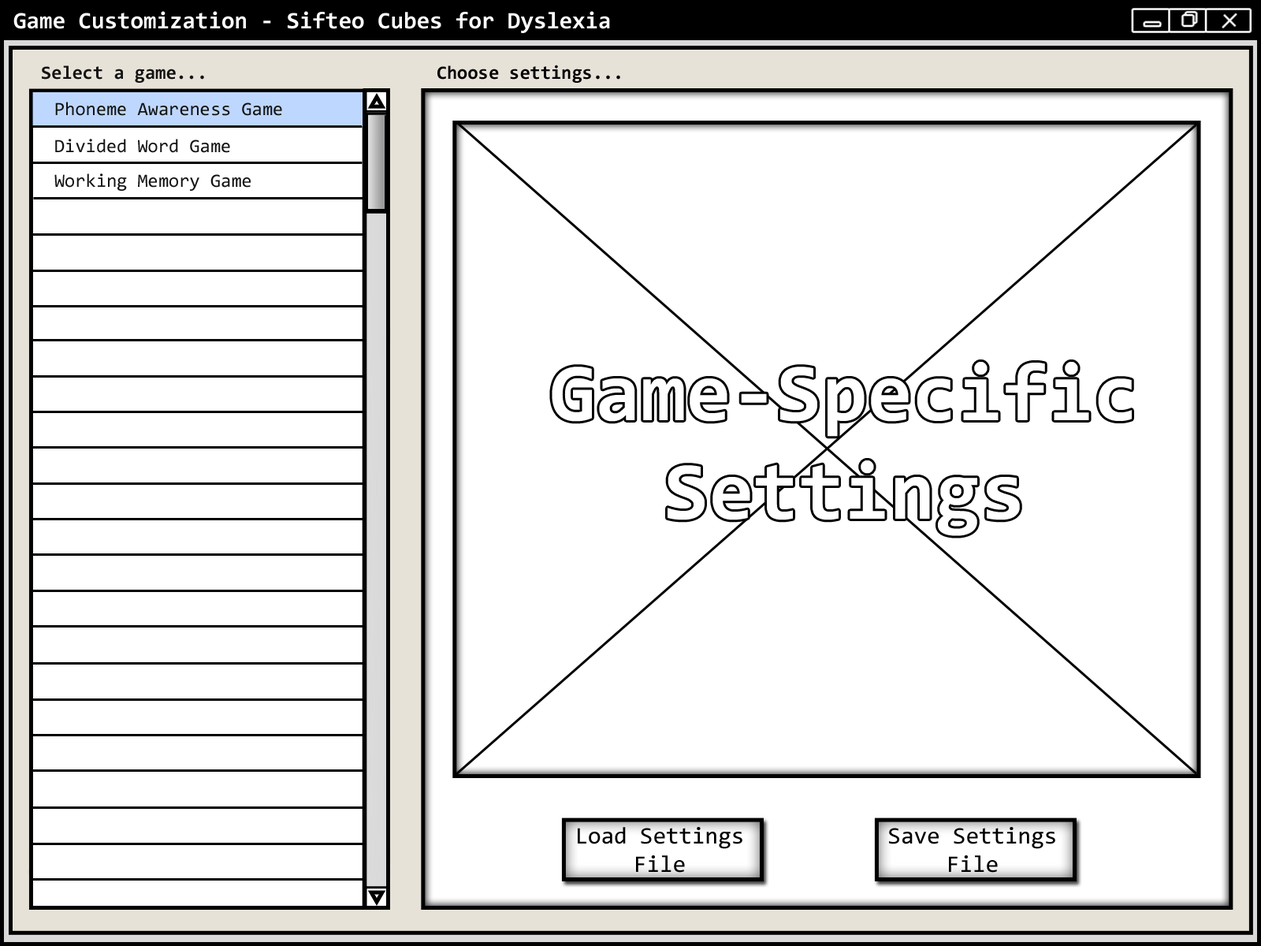
<style>
.page{position:relative;width:1261px;height:946px;background:#ffffff}
.page>*{position:absolute;margin:0}
.t1{font:23.6px "Consolas-Bold";color:#ffffff}
.t2{font:18.9px "Consolas-Bold";color:#131313}
.t3{font:18.9px "Consolas-Bold";color:#000000}
.t4{font:18.9px "Consolas";color:#131313}
.t5{font:23.6px "Consolas";color:#000000}
</style>
<div class="page">
<p class="t1" style="left:13px;top:11px;width:597px;height:22px">Game Customization - Sifteo Cubes for Dyslexia</p>
<p class="t2" style="left:42px;top:65px;width:162px;height:18px">Select a game...</p>
<p class="t3" style="left:437px;top:65px;width:183px;height:18px">Choose settings...</p>
<p class="t4" style="left:55px;top:102px;width:227px;height:14px">Phoneme Awareness Game</p>
<p class="t4" style="left:55px;top:139px;width:175px;height:14px">Divided Word Game</p>
<p class="t4" style="left:54px;top:173px;width:197px;height:18px">Working Memory Game</p>
<p class="t5" style="left:578px;top:827px;width:164px;height:45px;text-align:center">Load Settings<br>File</p>
<p class="t5" style="left:889px;top:827px;width:166px;height:45px;text-align:center">Save Settings<br>File</p>
</div>
